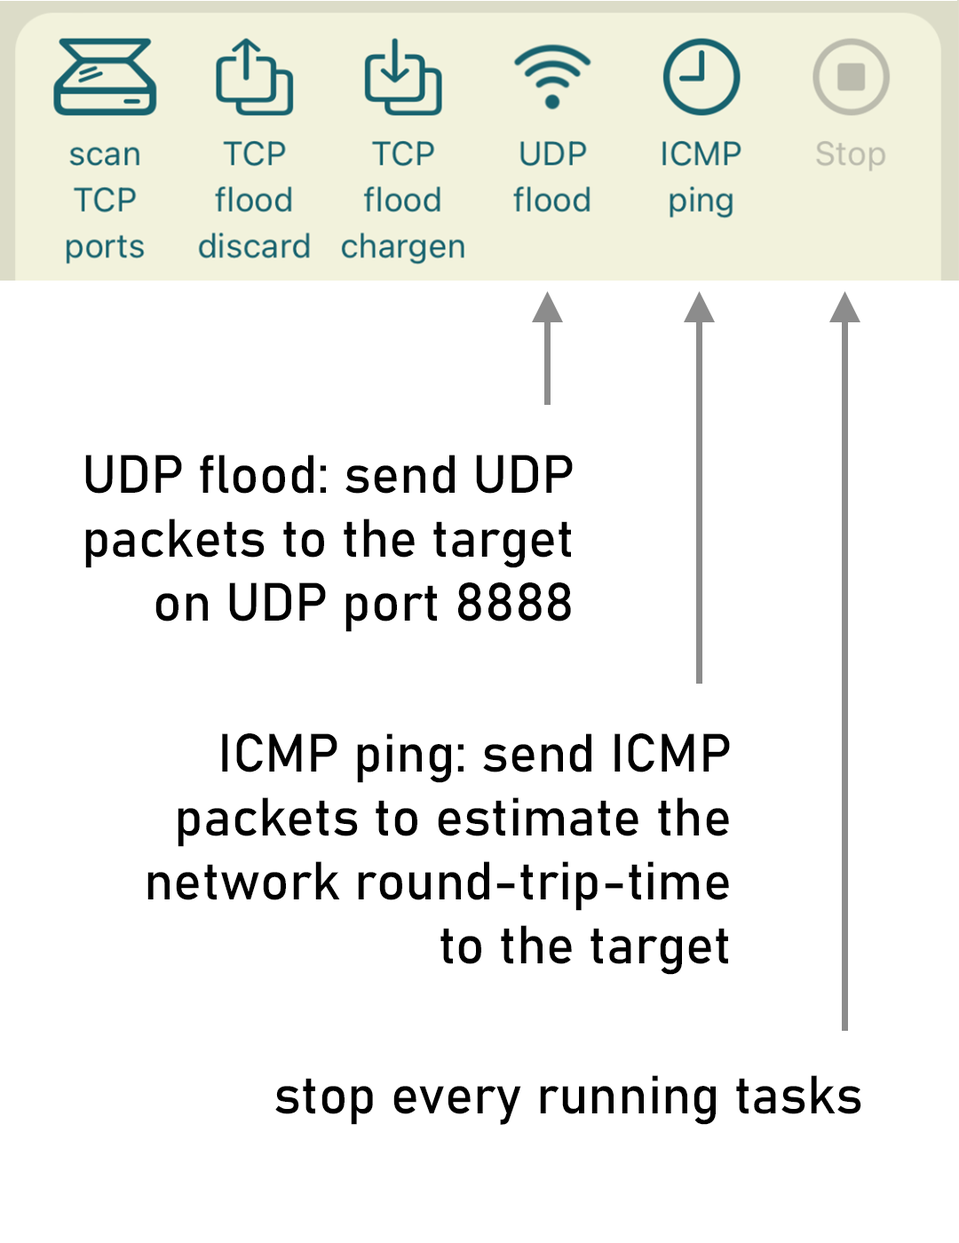
<style>
.page{position:relative;width:959px;height:1243px;background:#ffffff}
.page>*{position:absolute;margin:0}
.t1{font:53.3px "Bahnschrift";color:#000000}
</style>
<div class="page">
<p class="t1" style="left:85px;top:455px;width:488px;height:177px;text-align:right">UDP flood: send UDP<br>packets to the target<br>on UDP port 8888</p>
<p class="t1" style="left:147px;top:734px;width:583px;height:241px;text-align:right">ICMP ping: send ICMP<br>packets to estimate the<br>network round-trip-time<br>to the target</p>
<p class="t1" style="left:275px;top:1075px;width:586px;height:50px">stop every running tasks</p>
</div>
